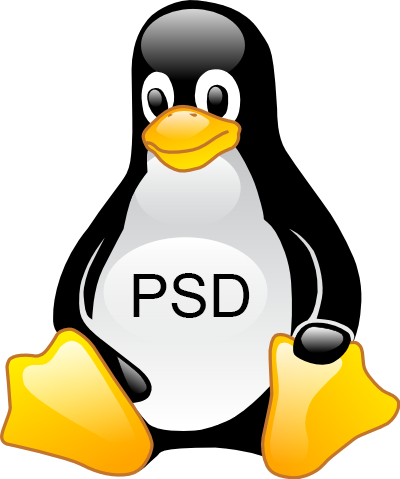
<style>
.page{position:relative;width:400px;height:479px;background:#ffffff}
.page>*{position:absolute;margin:0}
.t1{font:60px "ArialMT";color:#000000}
</style>
<div class="page">
<p class="t1" style="left:133px;top:273px;width:117px;height:45px">PSD</p>
</div>
